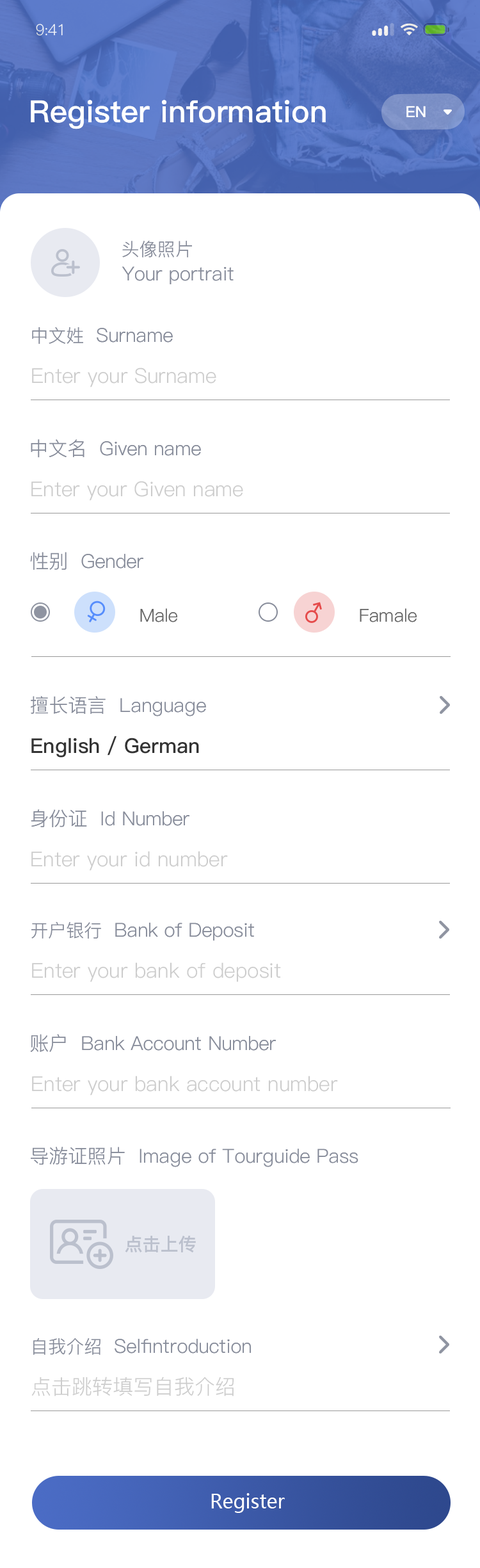
<style>
.page{position:relative;width:480px;height:1568px;background:#ffffff}
.page>*{position:absolute;margin:0}
.t1{font:15.4px "PingFang-SC-Regular";letter-spacing:-0.025em;color:#ffffff}
.t2{font:30.7px "PingFang-SC-Bold";color:#ffffff}
.t3{font:15.4px "PingFang-SC-Bold";color:#ffffff}
.t4{font:17.9px "PingFang-SC-Regular";color:#878c9a}
.t5{font:19.2px "PingFang-SC-Regular";color:#878c9a}
.t6{font:19.2px "PingFang-SC-Regular";color:#878c9a;text-transform:uppercase}
.t7{font:17.9px "PingFang-SC-Regular";color:#878c9a;text-transform:uppercase}
.t8{font:20.5px "PingFang-SC-Regular";color:#cccccc}
.t9{font:20.5px "PingFang-SC-Regular";color:#cccccc;text-transform:uppercase}
.t10{font:17.9px "PingFang-SC-Regular";color:#666666}
.t11{font:20.5px "PingFang-SC-Bold";color:#333333}
.t12{font:17.9px "PingFang-SC-Bold";color:#bbc0cd}
.t13{font:19.2px "MicrosoftYaHei";color:#ffffff}
</style>
<div class="page">
<p class="t1" style="left:36px;top:24px;width:27px;height:12px">9:41</p>
<p class="t2" style="left:31px;top:100px;width:295px;height:29px">Register information</p>
<p class="t3" style="left:407px;top:106px;width:19px;height:11px">EN</p>
<p class="t4" style="left:122px;top:241px;width:70px;height:16px">头像照片</p>
<p class="t5" style="left:122px;top:266px;width:112px;height:18px"><span class="t6">Y</span>our portrait</p>
<p class="t5" style="left:32px;top:327px;width:141px;height:17px"><span class="t7">中文姓 </span><span class="t6"> s</span>urname</p>
<p class="t8" style="left:32px;top:368px;width:184px;height:19px">Enter your Surname</p>
<p class="t5" style="left:31px;top:439px;width:170px;height:19px"><span class="t6">中文名  g</span>iven name</p>
<p class="t8" style="left:31px;top:481px;width:212px;height:20px">Enter your <span class="t9">g</span>iven name</p>
<p class="t6" style="left:30px;top:552px;width:113px;height:18px">性别  g<span class="t5">ender</span></p>
<p class="t10" style="left:140px;top:608px;width:38px;height:14px">Male</p>
<p class="t10" style="left:360px;top:608px;width:57px;height:14px">Famale</p>
<p class="t6" style="left:31px;top:696px;width:175px;height:20px">擅长语言  l<span class="t5">anguage</span></p>
<p class="t11" style="left:31px;top:736px;width:168px;height:21px">English / German</p>
<p class="t6" style="left:31px;top:809px;width:159px;height:18px">身份证  i<span class="t5">d</span> n<span class="t5">umber</span></p>
<p class="t8" style="left:31px;top:851px;width:197px;height:20px">Enter your id number</p>
<p class="t5" style="left:31px;top:922px;width:223px;height:19px"><span class="t7">开户银行 </span><span class="t6"> b</span>ank of <span class="t6">d</span>eposit</p>
<p class="t8" style="left:32px;top:962px;width:249px;height:20px">Enter your bank of deposit</p>
<p class="t5" style="left:30px;top:1034px;width:246px;height:18px"><span class="t6">账户  b</span>ank <span class="t6">a</span>ccount <span class="t6">n</span>umber</p>
<p class="t8" style="left:32px;top:1076px;width:306px;height:19px">Enter your bank account number</p>
<p class="t6" style="left:31px;top:1147px;width:328px;height:20px">导游证照片  i<span class="t5">mage of </span>t<span class="t5">ourguide </span>p<span class="t5">ass</span></p>
<p class="t12" style="left:125px;top:1236px;width:71px;height:17px">点击上传</p>
<p class="t5" style="left:33px;top:1338px;width:218px;height:17px"><span class="t7">自我介绍 </span><span class="t6"> s</span>elfintroduction</p>
<p class="t8" style="left:31px;top:1377px;width:203px;height:19px">点击跳转填写自我介绍</p>
<p class="t13" style="left:211px;top:1493px;width:74px;height:20px">Register</p>
</div>
